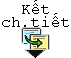
<style>
.page{position:relative;width:71px;height:58px;background:#ffffff}
.page>*{position:absolute;margin:0}
.t1{font:12px/13.3px "CourierNewPSMT";color:#000000}
</style>
<div class="page">
<p class="t1" style="left:2px;top:0px;width:67px;height:27px;text-align:center">Kết<br>ch.tiết</p>
</div>
